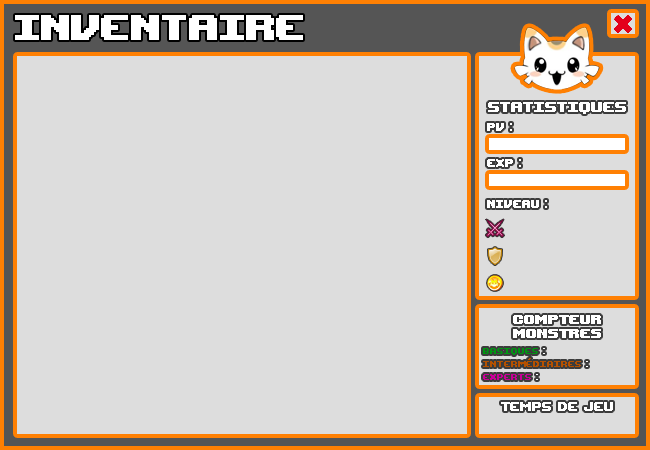
<style>
.page{position:relative;width:650px;height:450px;background:#dddddd}
.page>*{position:absolute;margin:0}
.t1{font:50px "UpheavalTT-BRK-";color:#ffffff}
.t2{font:20px "UpheavalTT-BRK-";color:#ffffff}
.t3{font:15px "UpheavalTT-BRK-";color:#ffffff}
.t4{font:18px "UpheavalTT-BRK-";color:#ffffff}
.t5{font:12px "UpheavalTT-BRK-";color:#009612}
.t6{font:12px "UpheavalTT-BRK-";color:#ffffff}
.t7{font:12px "UpheavalTT-BRK-";color:#b55100}
.t8{font:12px "UpheavalTT-BRK-";color:#c80097}
.t9{font:17px "UpheavalTT-BRK-";color:#ffffff}
</style>
<div class="page">
<p class="t1" style="left:15px;top:15px;width:288px;height:25px">INVENTAIRE</p>
<p class="t2" style="left:488px;top:102px;width:138px;height:12px">STATISTIQUES</p>
<p class="t3" style="left:487px;top:123px;width:25px;height:8px">pv :</p>
<p class="t3" style="left:487px;top:159px;width:34px;height:8px">EXP :</p>
<p class="t3" style="left:487px;top:200px;width:60px;height:8px">NIVEAU :</p>
<p class="t4" style="left:513px;top:315px;width:88px;height:9px">COMPTEUR</p>
<p class="t4" style="left:513px;top:329px;width:88px;height:9px">MONSTRES</p>
<p class="t5" style="left:483px;top:348px;width:62px;height:7px">basiques<span class="t6"> :</span></p>
<p class="t7" style="left:483px;top:358px;width:105px;height:9px">intermédiaires<span class="t6"> :</span></p>
<p class="t8" style="left:483px;top:374px;width:55px;height:6px">Experts<span class="t6"> :</span></p>
<p class="t9" style="left:501px;top:402px;width:112px;height:9px">Temps de Jeu</p>
</div>
